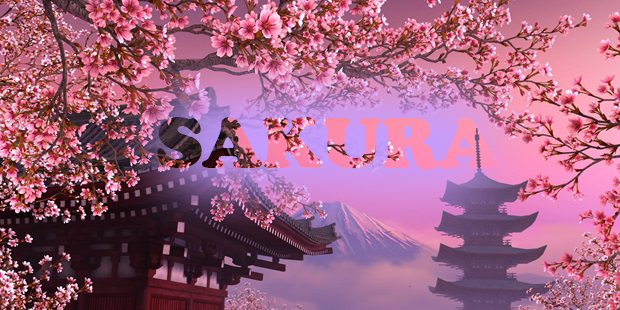
<style>
.page{position:relative;width:620px;height:310px}
.page>*{position:absolute;margin:0}
.t1{font:72.7px "CooperBlack"}
</style>
<div class="page">
<p class="t1" style="left:157px;top:117px;width:342px;height:52px">SAKURA</p>
</div>
